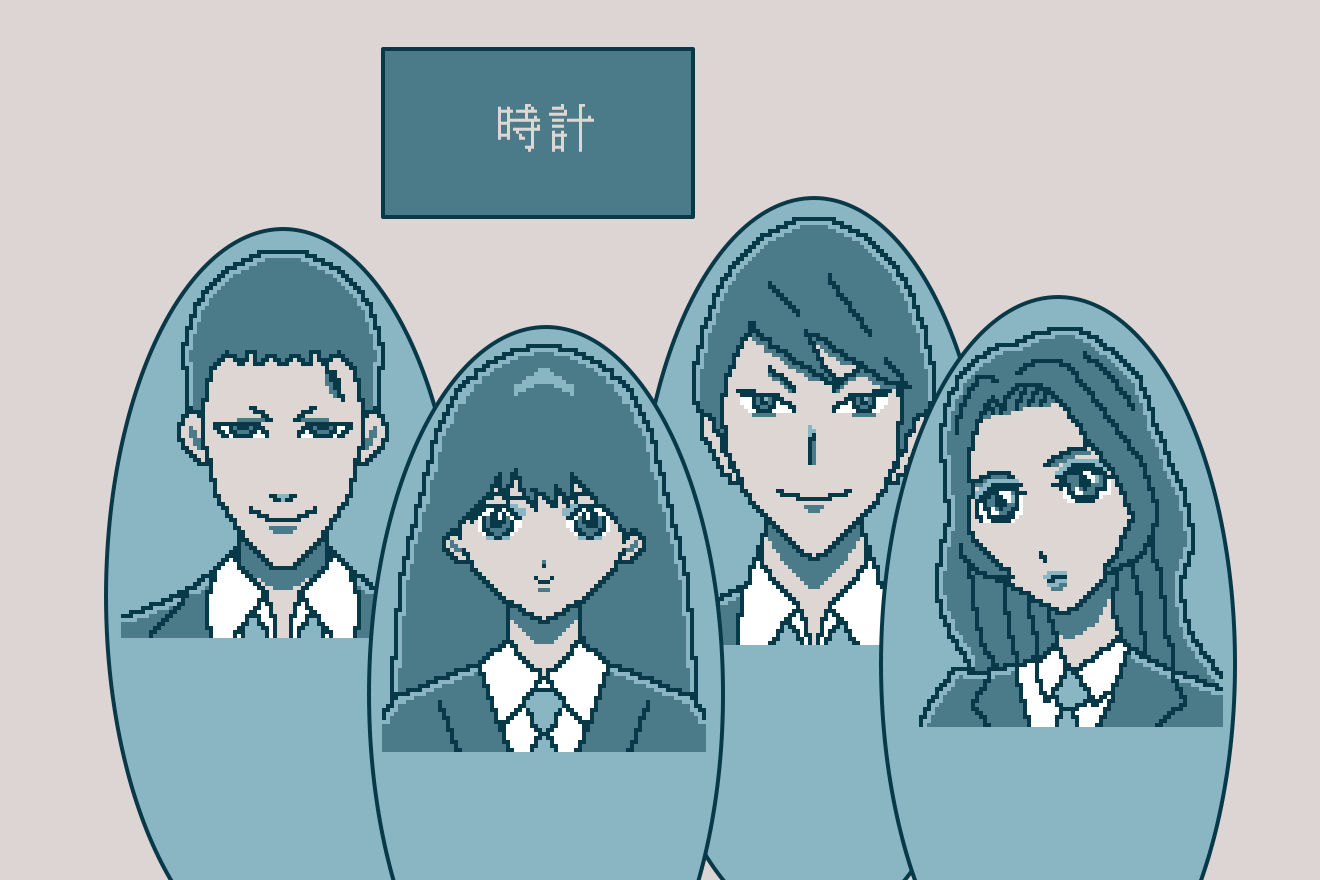
<style>
.page{position:relative;width:1320px;height:880px;background:#ddd5d3}
.page>*{position:absolute;margin:0}
.t1{font:48px "KH-Dot-kagurazaka-16";letter-spacing:0.14em;color:#e0d8d1}
</style>
<div class="page">
<p class="t1" style="left:498px;top:104px;width:96px;height:48px">時計</p>
</div>
